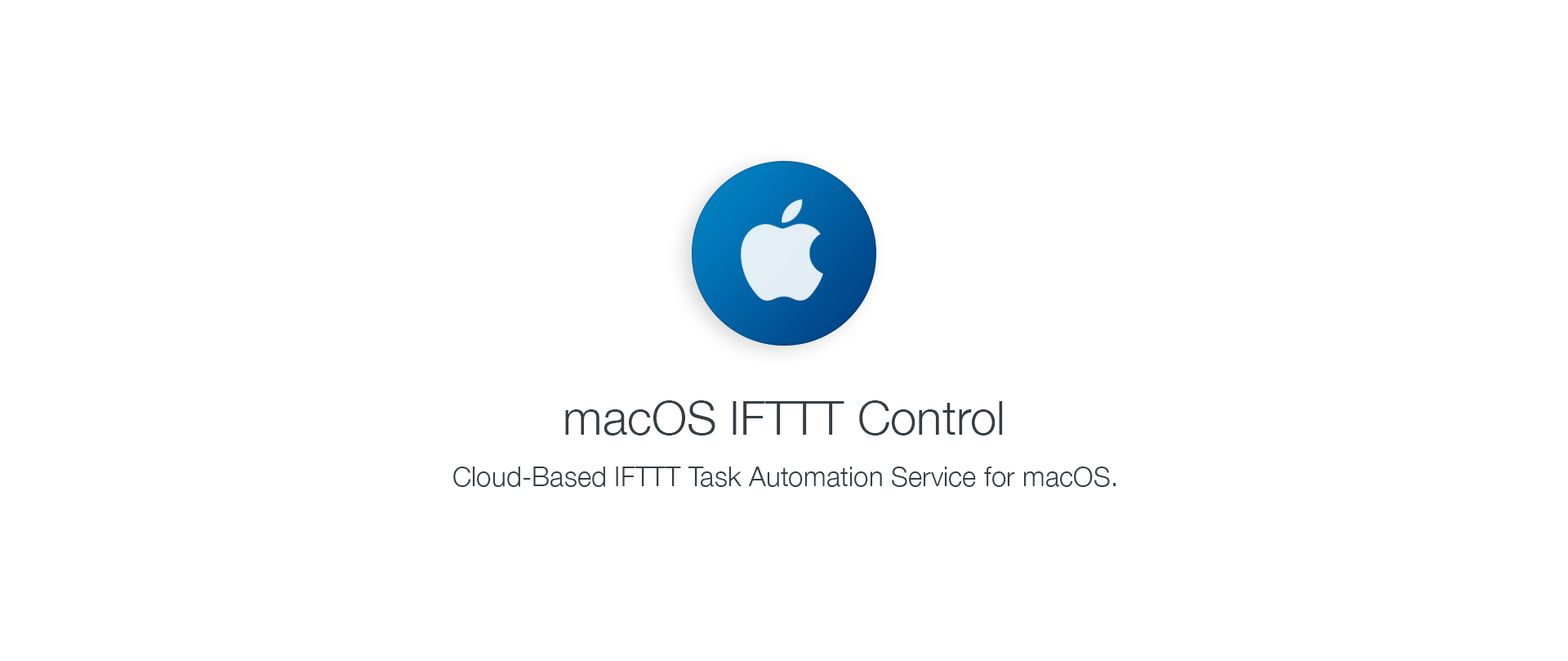
<style>
.page{position:relative;width:1568px;height:661px;background:#ffffff}
.page>*{position:absolute;margin:0}
.t1{font:47.3px "HelveticaNeue-Light";color:#343e44}
.t2{font:27.2px "HelveticaNeue-Light";color:#343e44}
</style>
<div class="page">
<p class="t1" style="left:565px;top:400px;width:438px;height:35px">macOS IFTTT Control</p>
<p class="t2" style="left:453px;top:466px;width:663px;height:21px">Cloud-Based IFTTT Task Automation Service for macOS.</p>
</div>
